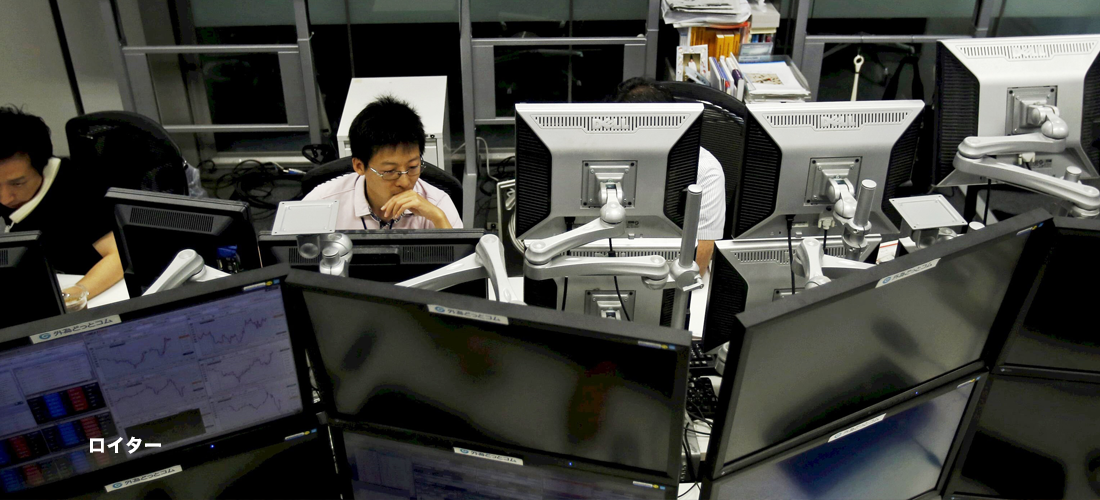
<style>
.page{position:relative;width:1100px;height:500px}
.page>*{position:absolute;margin:0}
.t1{font:18px "HiraKakuStd-W7";letter-spacing:0.04em;color:#ffffff}
</style>
<div class="page">
<p class="t1" style="left:90px;top:436px;width:71px;height:18px">ロイター</p>
</div>
